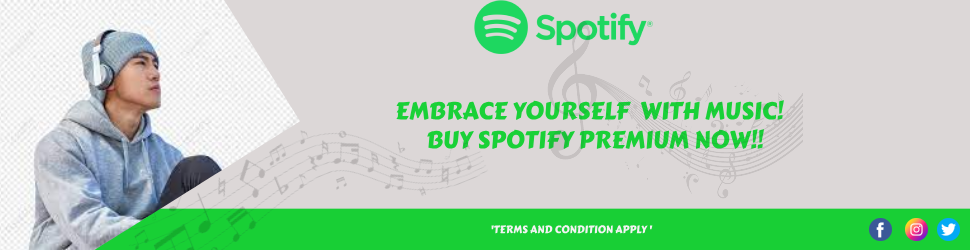
<style>
.page{position:relative;width:970px;height:250px;background:#dcd7d7}
.page>*{position:absolute;margin:0}
.t1{font:24px "CarterOne";color:#19d137}
.t2{font:10.6px "CarterOne";color:#f3f3f3}
</style>
<div class="page">
<p class="t1" style="left:396px;top:100px;width:388px;height:49px">EMBRACE YOURSELF  WITH MUSIC!<br>      BUY SPOTIFY PREMIUM NOW!!</p>
<p class="t2" style="left:491px;top:225px;width:162px;height:9px">'TERMS AND CONDITION APPLY '</p>
</div>
